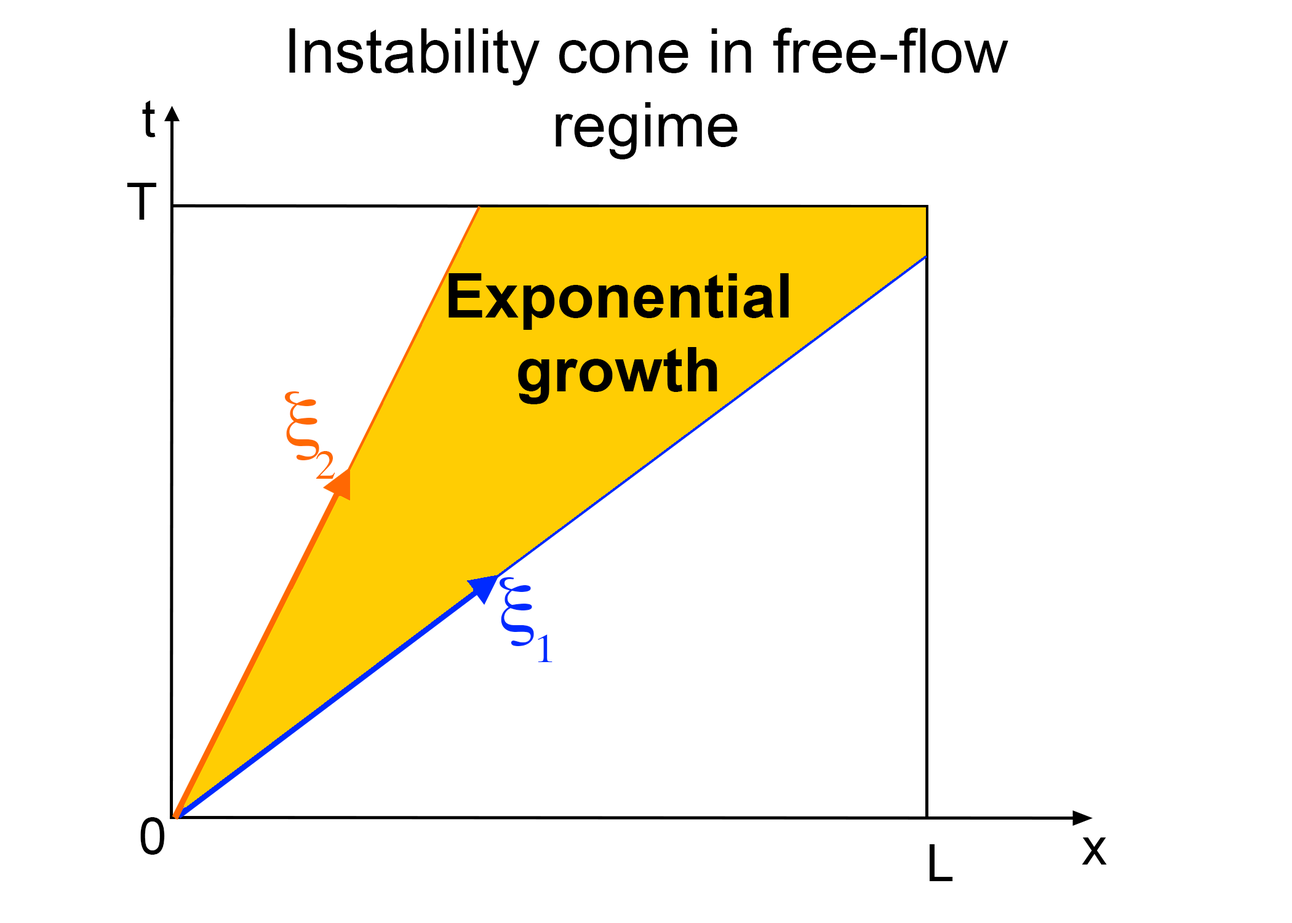
<style>
.page{position:relative;width:1292px;height:923px;background:#ffffff}
.page>*{position:absolute;margin:0}
.t1{font:61.5px "ArialMT";color:#000000}
.t2{font:51.3px "ArialMT";color:#000000}
.t3{font:61.5px "Arial-BoldMT";color:#000000}
</style>
<div class="page">
<p class="t1" style="left:289px;top:28px;width:719px;height:131px;text-align:center">Instability cone in free-flow regime</p>
<p class="t2" style="left:142px;top:100px;width:14px;height:37px">t</p>
<p class="t2" style="left:127px;top:183px;width:29px;height:37px">T</p>
<p class="t3" style="left:449px;top:273px;width:340px;height:131px;text-align:center">Exponential growth</p>
<p class="t2" style="left:140px;top:817px;width:25px;height:38px">0</p>
<p class="t2" style="left:930px;top:844px;width:23px;height:37px">L</p>
<p class="t2" style="left:1082px;top:837px;width:25px;height:27px">x</p>
</div>
